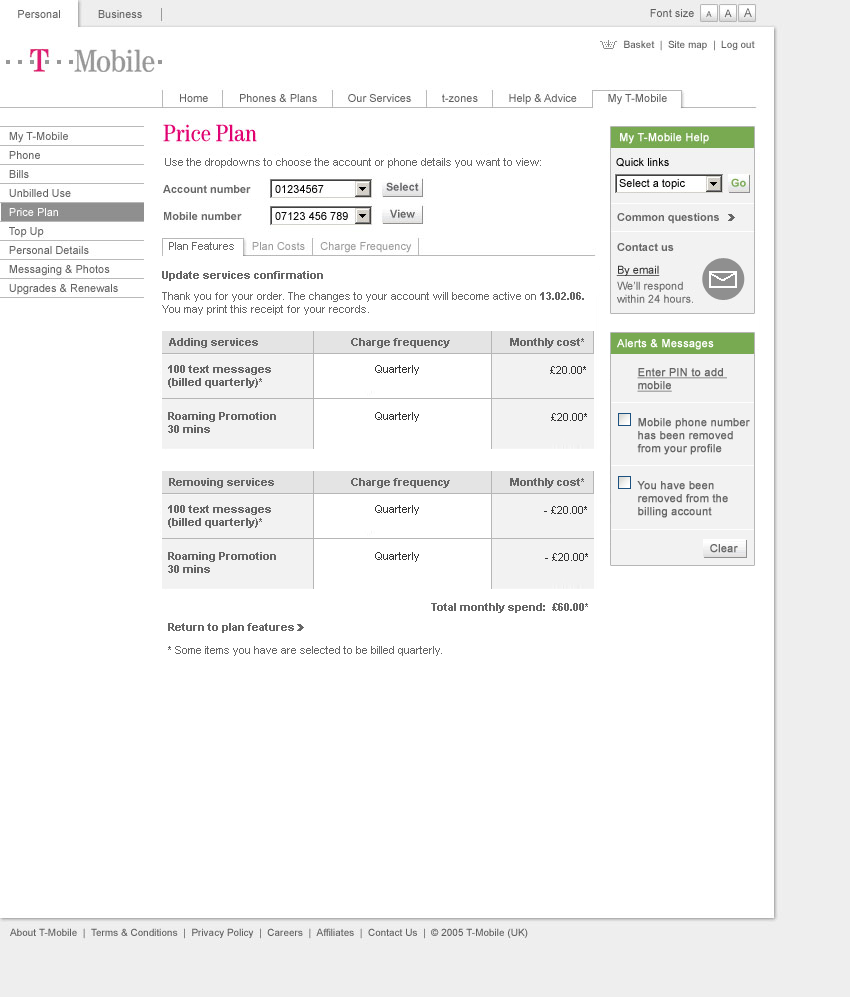
<style>
.page{position:relative;width:850px;height:997px;background:#ffffff}
.page>*{position:absolute;margin:0}
.t1{font:11px "ArialMT";color:#666666}
.t2{font:11px "Arial-BoldMT";color:#666666}
.t3{font:11px "ArialMT";color:#ffffff;font-weight:bold}
.t4{font:11px/21px "Arial-BoldMT";color:#666666}
.t5{font:11px "ArialMT";color:#333333}
.t6{font:11px "ArialMT";color:#666666;font-weight:bold;text-decoration:underline}
.t7{font:11px "ArialMT";color:#666666;font-weight:bold}
</style>
<div class="page">
<p class="t1" style="left:165px;top:158px;width:376px;height:10px">Use the dropdowns to choose the account or phone details you want to view:</p>
<p class="t1" style="left:169px;top:242px;width:65px;height:8px">Plan Features</p>
<p class="t2" style="left:162px;top:271px;width:161px;height:10px">Update services confirmation</p>
<p class="t1" style="left:162px;top:292px;width:422px;height:23px">Thank you for your order. The changes to your account will become active on <span class="t2">13.02.06.<br></span>You may print this receipt for your records.</p>
<p class="t2" style="left:169px;top:338px;width:89px;height:10px">Adding services</p>
<p class="t2" style="left:351px;top:338px;width:99px;height:10px">Charge frequency</p>
<p class="t2" style="left:510px;top:338px;width:74px;height:10px">Monthly cost*</p>
<p class="t3" style="left:617px;top:339px;width:97px;height:11px">Alerts &amp; Messages</p>
<p class="t2" style="left:168px;top:365px;width:108px;height:68px">100 text messages <br>(billed quarterly)*<br><br><span class="t4">Roaming Promotion<br></span>30 mins</p>
<p class="t5" style="left:375px;top:365px;width:44px;height:10px">Quarterly</p>
<p class="t5" style="left:550px;top:366px;width:36px;height:8px">£20.00*</p>
<p class="t6" style="left:637px;top:368px;width:90px;height:24px">Enter PIN to add <br>mobile</p>
<p class="t5" style="left:375px;top:412px;width:44px;height:10px">Quarterly</p>
<p class="t5" style="left:551px;top:413px;width:36px;height:8px">£20.00*</p>
<p class="t7" style="left:637px;top:418px;width:113px;height:37px">Mobile phone number <br>has been removed <br>from your profile</p>
<p class="t2" style="left:169px;top:478px;width:105px;height:10px">Removing services</p>
<p class="t2" style="left:351px;top:478px;width:99px;height:10px">Charge frequency</p>
<p class="t2" style="left:510px;top:478px;width:74px;height:10px">Monthly cost*</p>
<p class="t7" style="left:637px;top:481px;width:91px;height:37px">You have been <br>removed from the <br>billing account</p>
<p class="t2" style="left:168px;top:505px;width:108px;height:68px">100 text messages <br>(billed quarterly)*<br><br><span class="t4">Roaming Promotion<br></span>30 mins</p>
<p class="t5" style="left:375px;top:505px;width:44px;height:10px">Quarterly</p>
<p class="t5" style="left:544px;top:506px;width:43px;height:8px">- £20.00*</p>
<p class="t7" style="left:710px;top:544px;width:28px;height:9px">Clear</p>
<p class="t5" style="left:375px;top:552px;width:44px;height:10px">Quarterly</p>
<p class="t5" style="left:545px;top:553px;width:43px;height:8px">- £20.00*</p>
<p class="t2" style="left:431px;top:603px;width:157px;height:10px">Total monthly spend:  £60.00*</p>
<p class="t2" style="left:168px;top:623px;width:126px;height:10px">Return to plan features</p>
<p class="t1" style="left:168px;top:646px;width:274px;height:10px">* Some items you have are selected to be billed quarterly.</p>
</div>
